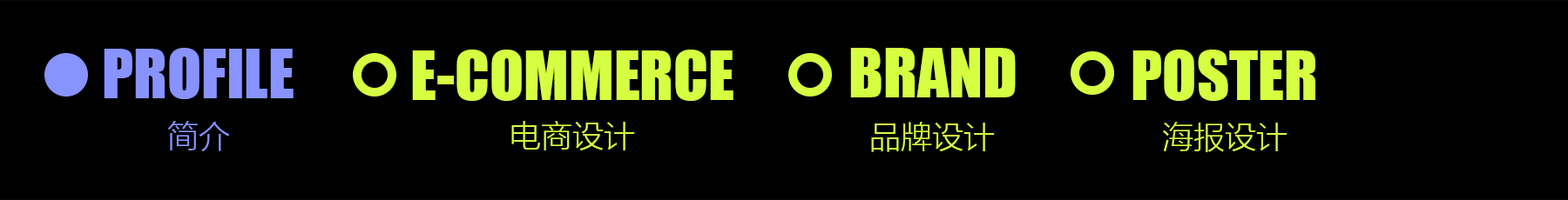
<style>
.page{position:relative;width:1568px;height:200px;background:#000000}
.page>*{position:absolute;margin:0}
.t1{font:62.7px "Impact";color:#8893ff}
.t2{font:62.7px "Impact";color:#d6ff41}
.t3{font:31.4px "MicrosoftYaHeiLight";color:#8893ff}
.t4{font:31.4px "MicrosoftYaHeiLight";color:#d6ff41}
</style>
<div class="page">
<p class="t1" style="left:104px;top:48px;width:190px;height:51px">PROFILE</p>
<p class="t2" style="left:412px;top:50px;width:321px;height:51px">E-COMMERCE</p>
<p class="t2" style="left:850px;top:48px;width:166px;height:50px">BRAND</p>
<p class="t2" style="left:1132px;top:50px;width:183px;height:51px">POSTER</p>
<p class="t3" style="left:168px;top:121px;width:61px;height:31px">简介</p>
<p class="t4" style="left:511px;top:121px;width:124px;height:30px">电商设计</p>
<p class="t4" style="left:871px;top:122px;width:124px;height:30px">品牌设计</p>
<p class="t4" style="left:1163px;top:122px;width:125px;height:30px">海报设计</p>
</div>
